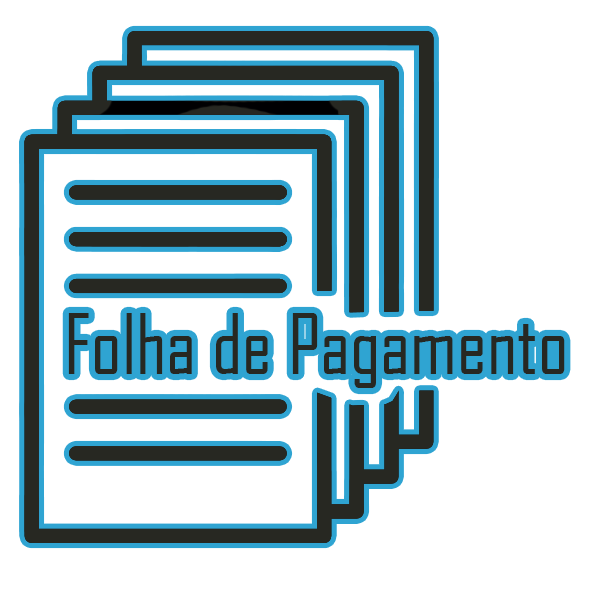
<style>
.page{position:relative;width:600px;height:600px;background:#ffffff}
.page>*{position:absolute;margin:0}
.t1{font:80px "AgencyFB-Reg";color:#272822}
</style>
<div class="page">
<p class="t1" style="left:68px;top:313px;width:497px;height:75px">Folha de Pagamento</p>
</div>
